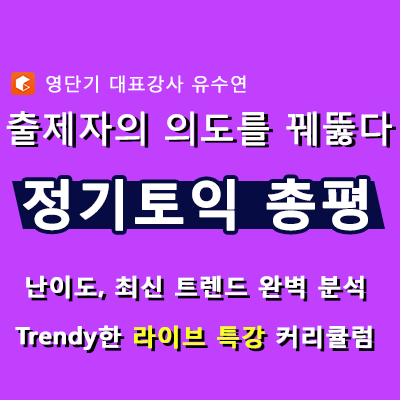
<style>
.page{position:relative;width:400px;height:400px;background:#c140fd}
.page>*{position:absolute;margin:0}
.t1{font:18.1px "MalgunGothicRegular";color:#fffefe;font-weight:bold}
.t2{font:35.3px "MalgunGothicRegular";color:#fefefe;font-weight:bold}
.t3{font:35.3px "MalgunGothicRegular";font-weight:bold}
.t4{font:53.6px "MalgunGothicBold";color:#ffffff;font-weight:bold}
.t5{font:23.9px "MalgunGothicBold";color:#fefefe;font-weight:bold}
.t6{font:23.9px "MalgunGothicBold";font-weight:bold}
.t7{font:23.7px "MalgunGothicBold";color:#fefefe;font-weight:bold}
.t8{font:23.7px "MalgunGothicBold";color:#f7ff22;font-weight:bold}
.t9{font:23.7px "MalgunGothicBold";font-weight:bold}
</style>
<div class="page">
<p class="t1" style="left:46px;top:75px;width:200px;height:18px">영단기 대표강사 유수연</p>
<p class="t2" style="left:6px;top:111px;width:386px;height:35px">출제자의 의도를 꿰뚫다</p>
<p class="t3" style="left:10px;top:113px;width:386px;height:35px">출제자의 의도를 꿰뚫다</p>
<p class="t4" style="left:23px;top:178px;width:345px;height:53px">정기토익 총평</p>
<p class="t5" style="left:26px;top:275px;width:338px;height:24px">난이도, 최신 트렌드 완벽 분석</p>
<p class="t6" style="left:29px;top:278px;width:338px;height:24px">난이도, 최신 트렌드 완벽 분석</p>
<p class="t7" style="left:15px;top:325px;width:357px;height:25px">Trendy한 <span class="t8">라이브 특강</span> 커리큘럼</p>
<p class="t9" style="left:18px;top:328px;width:357px;height:25px">Trendy한 라이브 특강 커리큘럼</p>
</div>
